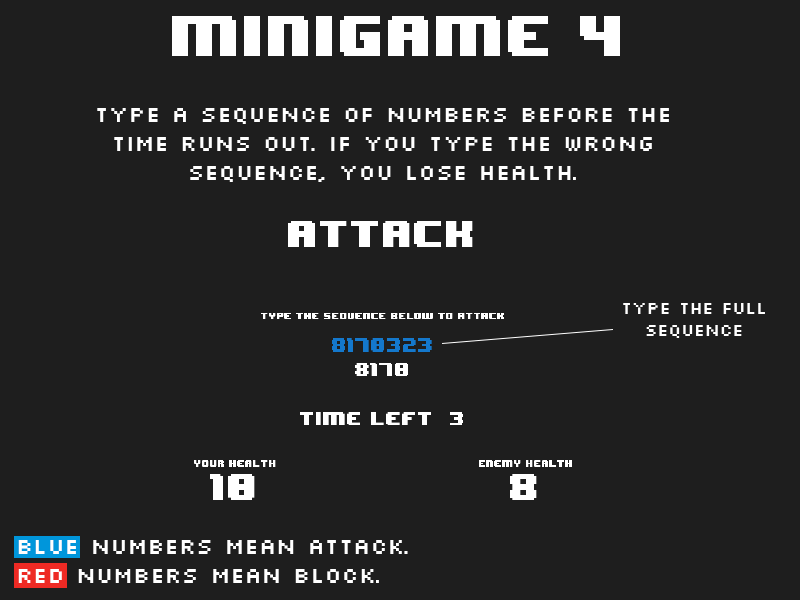
<style>
.page{position:relative;width:800px;height:600px;background:#1e1e1e}
.page>*{position:absolute;margin:0}
.t1{font:48px "8BITWONDERNominal";color:#ffffff}
.t2{font:24px "Silkscreen";color:#ffffff}
.t3{font:18px "Silkscreen";color:#ffffff}
</style>
<div class="page">
<p class="t1" style="left:172px;top:16px;width:448px;height:40px">minigame 4</p>
<p class="t2" style="left:97px;top:108px;width:572px;height:74px;text-align:center">type a sequence of numbers before the<br>time runs out. if you type the wrong<br>sequence, you lose health.</p>
<p class="t3" style="left:623px;top:303px;width:142px;height:35px;text-align:center">type the full<br>sequence</p>
<p class="t2" style="left:18px;top:540px;width:390px;height:43px">blue numbers mean attack.<br>red numbers mean block.</p>
</div>
